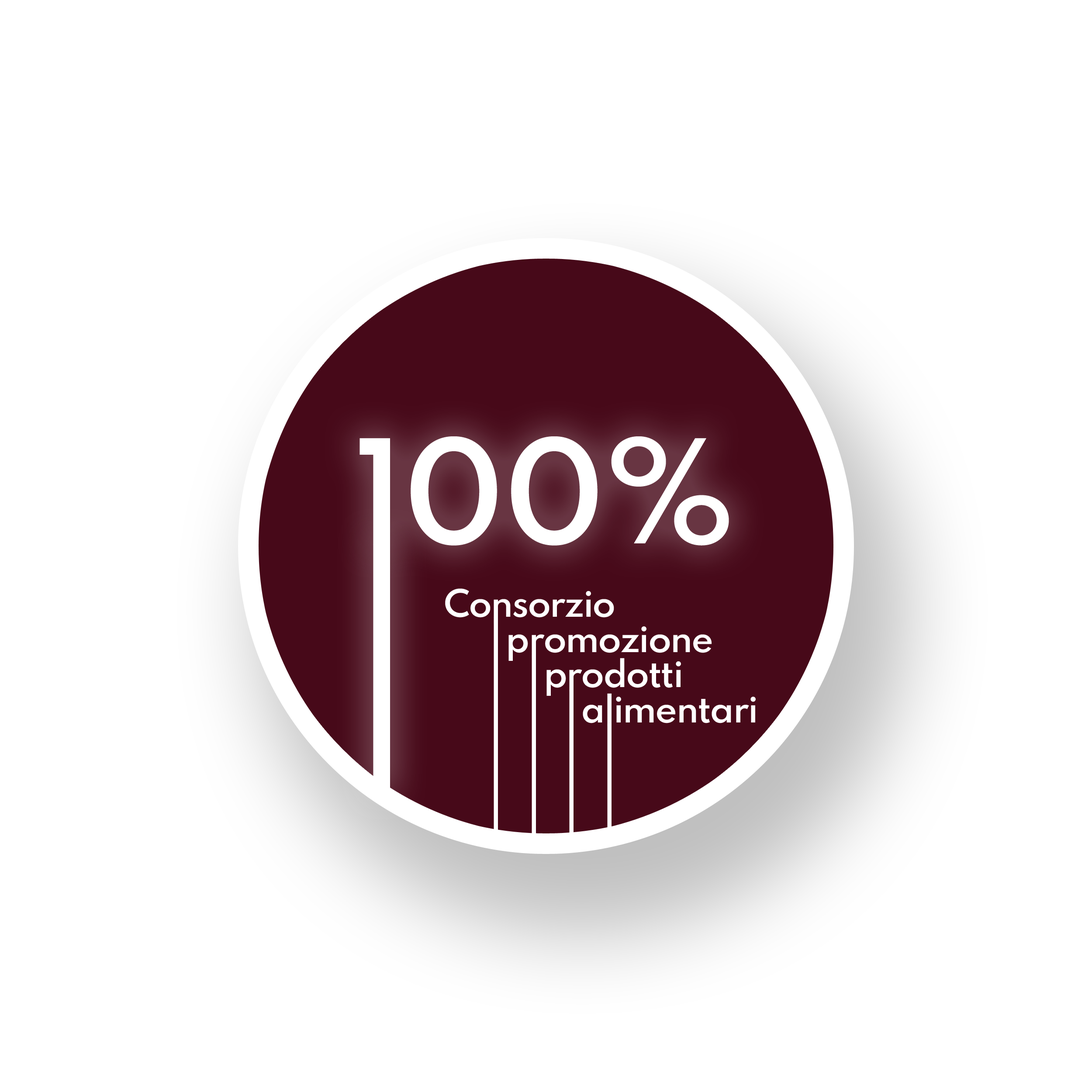
<style>
.page{position:relative;width:1092px;height:1092px;background:#ffffff}
.page>*{position:absolute;margin:0}
.t1{font:127.4px "Spartan-SemiBold";letter-spacing:-0.02em;color:#ffffff}
.t2{font:33.6px/35.2px "Spartan-SemiBold";letter-spacing:-0.04em;color:#ffffff}
.t3{font:28.1px/35.2px "Spartan-SemiBold";letter-spacing:-0.04em;color:#ffffff}
</style>
<div class="page">
<p class="t1" style="left:359px;top:436px;width:370px;height:110px">100%</p>
<p class="t2" style="left:445px;top:588px;width:311px;height:135px"><span class="t3"> </span>Consorzio<br>         promozione <br>              prodotti<br>                   alimentari</p>
</div>
